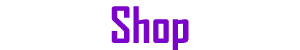
<style>
.page{position:relative;width:300px;height:50px;background:#ffffff}
.page>*{position:absolute;margin:0}
.t1{font:48px "AgencyFB-Bold";color:#7b02c9}
</style>
<div class="page">
<p class="t1" style="left:111px;top:6px;width:78px;height:46px">Shop</p>
</div>
